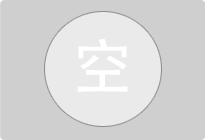
<style>
.page{position:relative;width:205px;height:140px;background:#cfcfcf}
.page>*{position:absolute;margin:0}
.t1{font:60px "STHeiti";color:#ffffff}
</style>
<div class="page">
<p class="t1" style="left:77px;top:38px;width:51px;height:54px">空</p>
</div>
